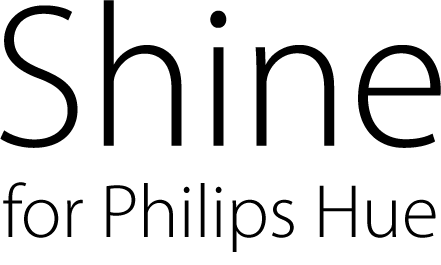
<style>
.page{position:relative;width:441px;height:265px;background:#ffffff}
.page>*{position:absolute;margin:0}
.t1{font:76px "MyriadPro-Light";color:#000000}
.t2{font:205px "MyriadPro-Light";color:#000000}
</style>
<div class="page">
<p class="t1" style="left:0px;top:0px;width:441px;height:252px;text-align:center"><span class="t2">Shine<br></span>for Philips Hue</p>
</div>
